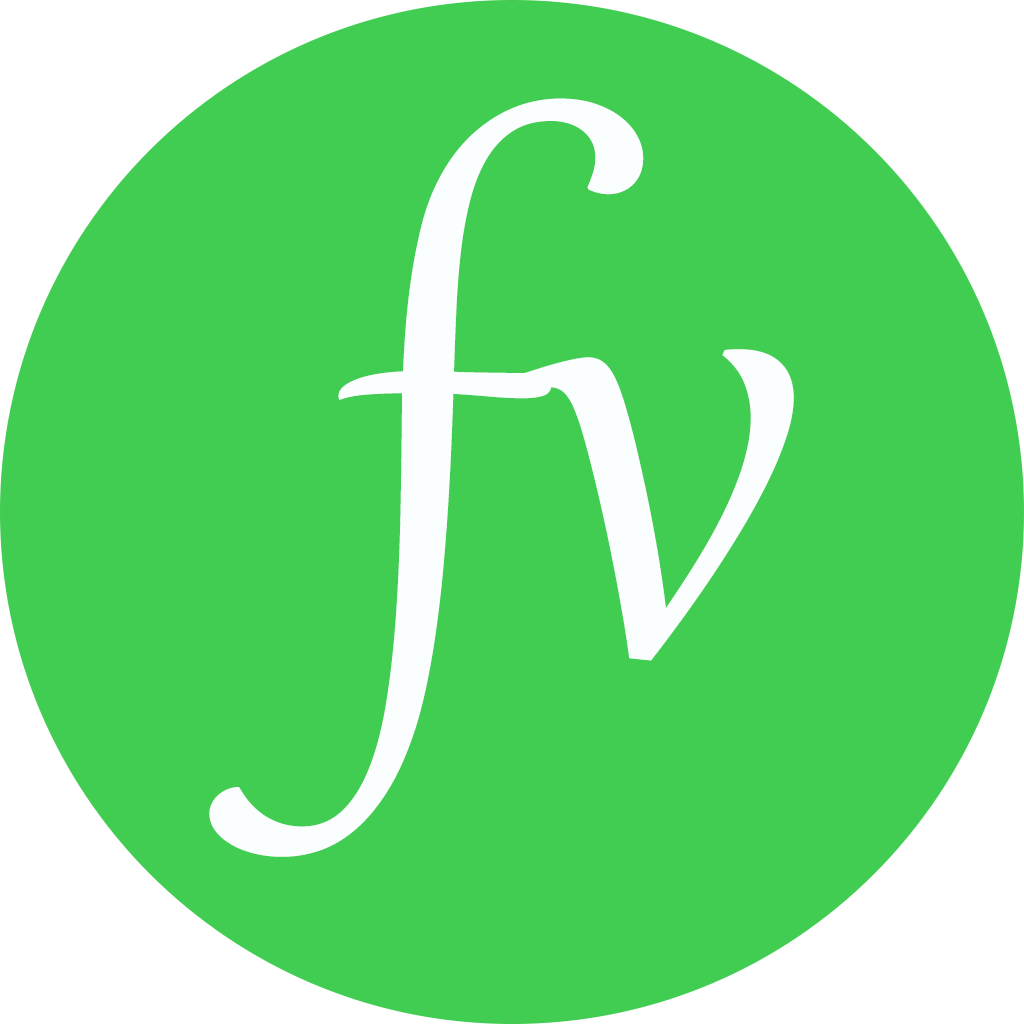
<style>
.page{position:relative;width:1024px;height:1024px;background:#41cd52}
.page>*{position:absolute;margin:0}
.t1{font:833.3px "Gabriola";color:#fbfeff}
</style>
<div class="page">
<p class="t1" style="left:209px;top:98px;width:585px;height:759px">fv</p>
</div>
